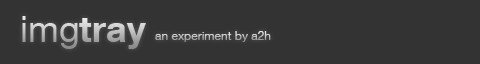
<style>
.page{position:relative;width:480px;height:64px;background:#333333}
.page>*{position:absolute;margin:0}
.t1{font:36px "HelveticaNeue-Bold"}
.t2{font:36px "HelveticaNeue"}
.t3{font:12px "HelveticaNeue"}
</style>
<div class="page">
<p class="t1" style="left:22px;top:16px;width:124px;height:33px"><span class="t2">img</span>tray</p>
<p class="t3" style="left:155px;top:31px;width:116px;height:11px">an experiment by a2h</p>
</div>
